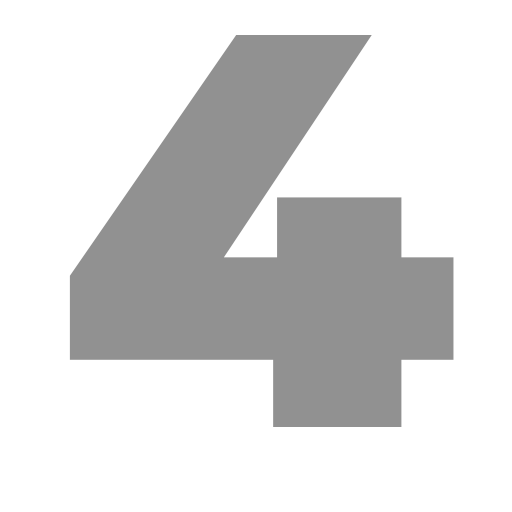
<style>
.page{position:relative;width:512px;height:512px;background:#ffffff}
.page>*{position:absolute;margin:0}
.t1{font:560px "MontserratRoman-Black";color:#919191}
</style>
<div class="page">
<p class="t1" style="left:69px;top:35px;width:385px;height:392px">4</p>
</div>
